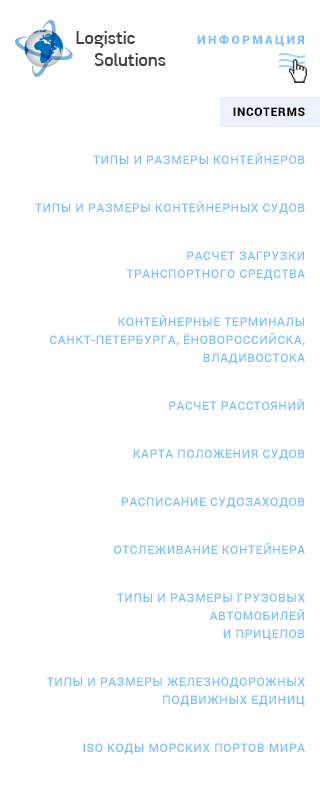
<style>
.page{position:relative;width:320px;height:802px;background:#ffffff}
.page>*{position:absolute;margin:0}
.t1{font:12px "Roboto-Black";letter-spacing:0.2em;color:#7ac0ff;text-transform:uppercase}
.t2{font:12px/18px "Roboto-Medium";letter-spacing:0.05em;color:#7ac0ff;text-transform:uppercase}
.t3{font:12px/18px "Roboto-Black";letter-spacing:0.05em;color:#000000;text-transform:uppercase}
</style>
<div class="page">
<p class="t1" style="left:197px;top:35px;width:107px;height:11px">Информация</p>
<p class="t2" style="left:35px;top:107px;width:270px;height:647px;text-align:right"><span class="t3">Incoterms<br></span>Типы и размеры контейнеров <br>Типы и размеры контейнерных судов <br>Расчет загрузки <br>транспортного средства <br>Контейнерные терминалы Санкт-Петербурга, ЁНовороссийска, Владивостока<br>Расчет расстояний<br>Карта положения судов<br>Расписание судозаходов<br>Отслеживание контейнера<br>Типы и размеры грузовых <br>автомобилей <br>и прицепов <br>Типы и размеры железнодорожных подвижных единиц <br>ISO коды морских портов мира</p>
</div>
